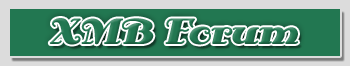
<style>
.page{position:relative;width:350px;height:66px;background:#dcdcdc}
.page>*{position:absolute;margin:0}
.t1{font:36px "AntsyPants";color:#227751}
</style>
<div class="page">
<p class="t1" style="left:49px;top:18px;width:250px;height:27px">XMB Forum</p>
</div>
